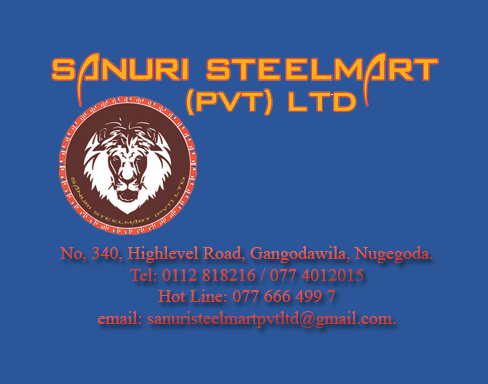
<style>
.page{position:relative;width:488px;height:384px;background:#2b579a}
.page>*{position:absolute;margin:0}
.t1{font:18px "TimesNewRomanPSMT";color:#e84531}
</style>
<div class="page">
<p class="t1" style="left:60px;top:246px;width:373px;height:82px;text-align:center">No, 340, Highlevel Road, Gangodawila, Nugegoda.<br>Tel: 0112 818216 / 077 4012015<br>Hot Line: 077 666 499 7<br>email: sanuristeelmartpvtltd@gmail.com.</p>
</div>
